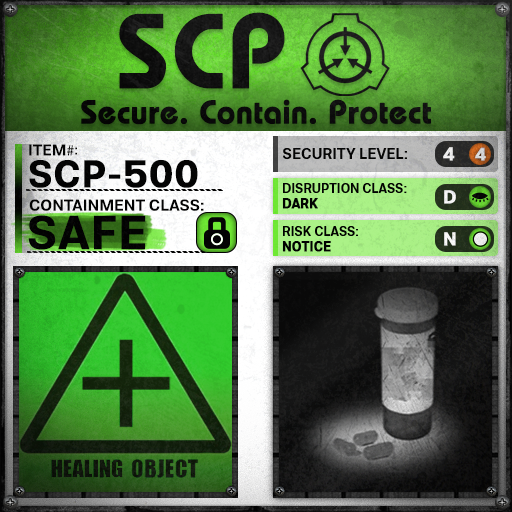
<style>
.page{position:relative;width:512px;height:512px}
.page>*{position:absolute;margin:0}
.t1{font:105.8px "BauhausLT-Demi";color:#000000;font-weight:bold}
.t2{font:33px "BauhausLT-Demi";color:#000000;font-weight:bold}
.t3{font:15.7px "Molde-Semibold";color:#000000}
.t4{font:15.7px "MyriadPro-Regular";color:#000000}
.t5{font:13.7px "Molde-Semibold";color:#000000}
.t6{font:15px "Molde-Semibold";color:#000000}
.t7{font:18.6px "Molde-Semibold";color:#ffffff;font-weight:bold}
.t8{font:17.8px "Molde-Semibold";color:#d5d6d6;font-weight:bold}
.t9{font:38.2px "Molde-Semibold";color:#000000;font-weight:bold}
.t10{font:12.8px "Molde-Semibold";color:#000000}
.t11{font:12.8px "Molde-Semibold";color:#000000;font-weight:bold}
.t12{font:15.9px "Molde-Semibold";color:#000000}
.t13{font:47.2px "Molde-Semibold";color:#000000;font-weight:bold}
</style>
<div class="page">
<p class="t1" style="left:119px;top:12px;width:166px;height:77px">SCP</p>
<p class="t2" style="left:81px;top:99px;width:350px;height:26px">Secure. Contain. Protect</p>
<p class="t3" style="left:29px;top:144px;width:45px;height:12px">ITEM<span class="t4">#</span></p>
<p class="t5" style="left:75px;top:147px;width:2px;height:8px">:</p>
<p class="t6" style="left:283px;top:148px;width:124px;height:11px">SECURITY LEVEL:</p>
<p class="t7" style="left:443px;top:147px;width:12px;height:14px">4</p>
<p class="t8" style="left:475px;top:147px;width:11px;height:14px">4</p>
<p class="t9" style="left:29px;top:160px;width:169px;height:28px">SCP-500</p>
<p class="t10" style="left:282px;top:183px;width:125px;height:26px">DISRUPTION CLASS:<br><span class="t11">DARK</span></p>
<p class="t7" style="left:444px;top:190px;width:12px;height:14px">D</p>
<p class="t12" style="left:29px;top:199px;width:175px;height:12px">CONTAINMENT CLASS:</p>
<p class="t13" style="left:28px;top:215px;width:118px;height:35px">SAFE</p>
<p class="t10" style="left:282px;top:226px;width:76px;height:26px">RISK CLASS:<br><span class="t11">NOTICE</span></p>
<p class="t7" style="left:444px;top:232px;width:12px;height:14px">N</p>
</div>
